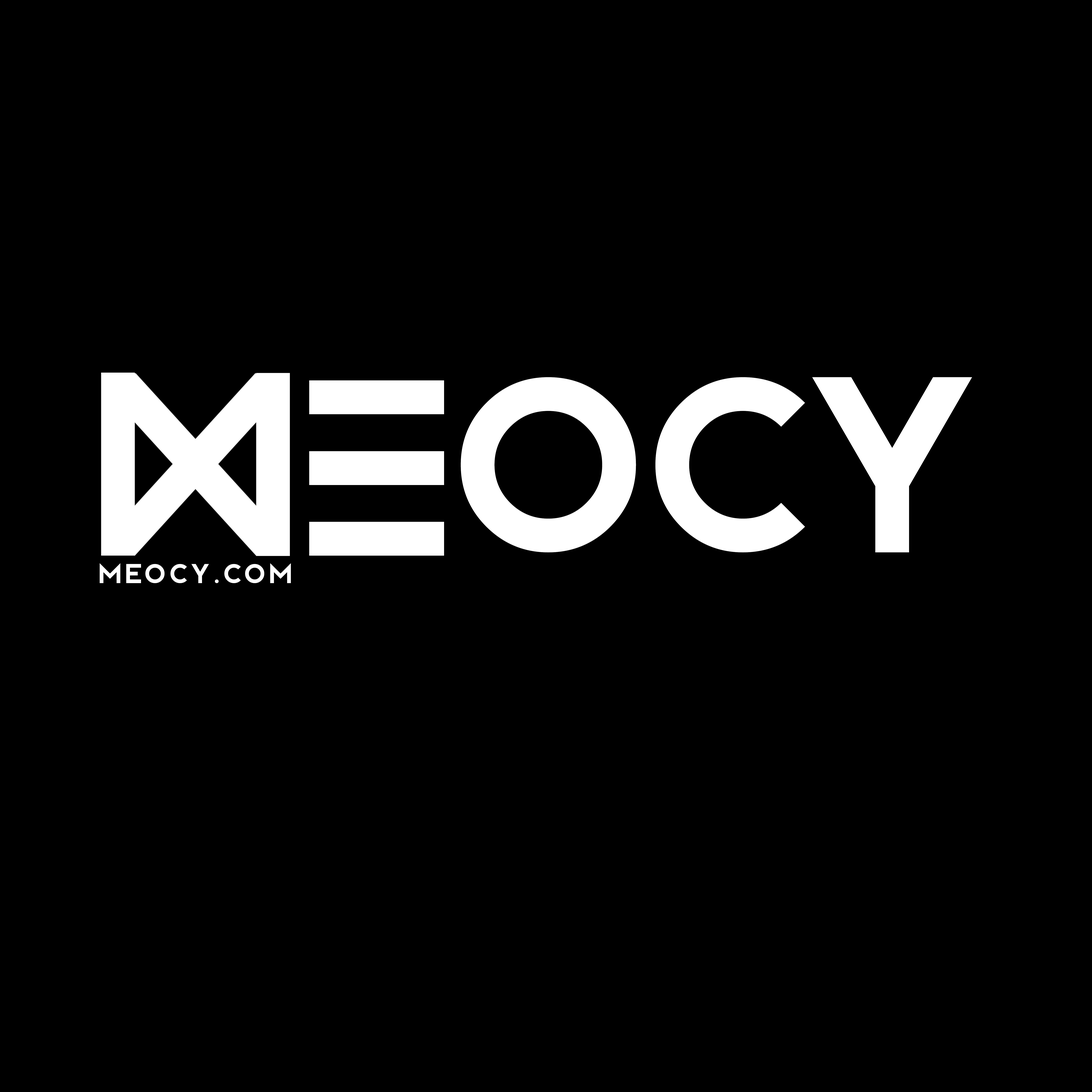
<style>
.page{position:relative;width:1092px;height:1092px;background:#000000}
.page>*{position:absolute;margin:0}
.t1{font:249.9px "Bjorn-Regular";color:#ffffff;text-transform:uppercase}
.t2{font:27.3px "Bjorn-Regular";letter-spacing:0.14em;color:#ffffff;text-transform:uppercase}
</style>
<div class="page">
<p class="t1" style="left:461px;top:377px;width:511px;height:175px">OCY</p>
<p class="t2" style="left:100px;top:563px;width:191px;height:20px">MEOCY.com</p>
</div>
